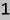
<style>
.page{position:relative;width:10px;height:20px;background:#c0c0c0}
.page>*{position:absolute;margin:0}
.t1{font:18px "Consolas";color:#000000}
</style>
<div class="page">
<p class="t1" style="left:1px;top:3px;width:9px;height:12px">1</p>
</div>
